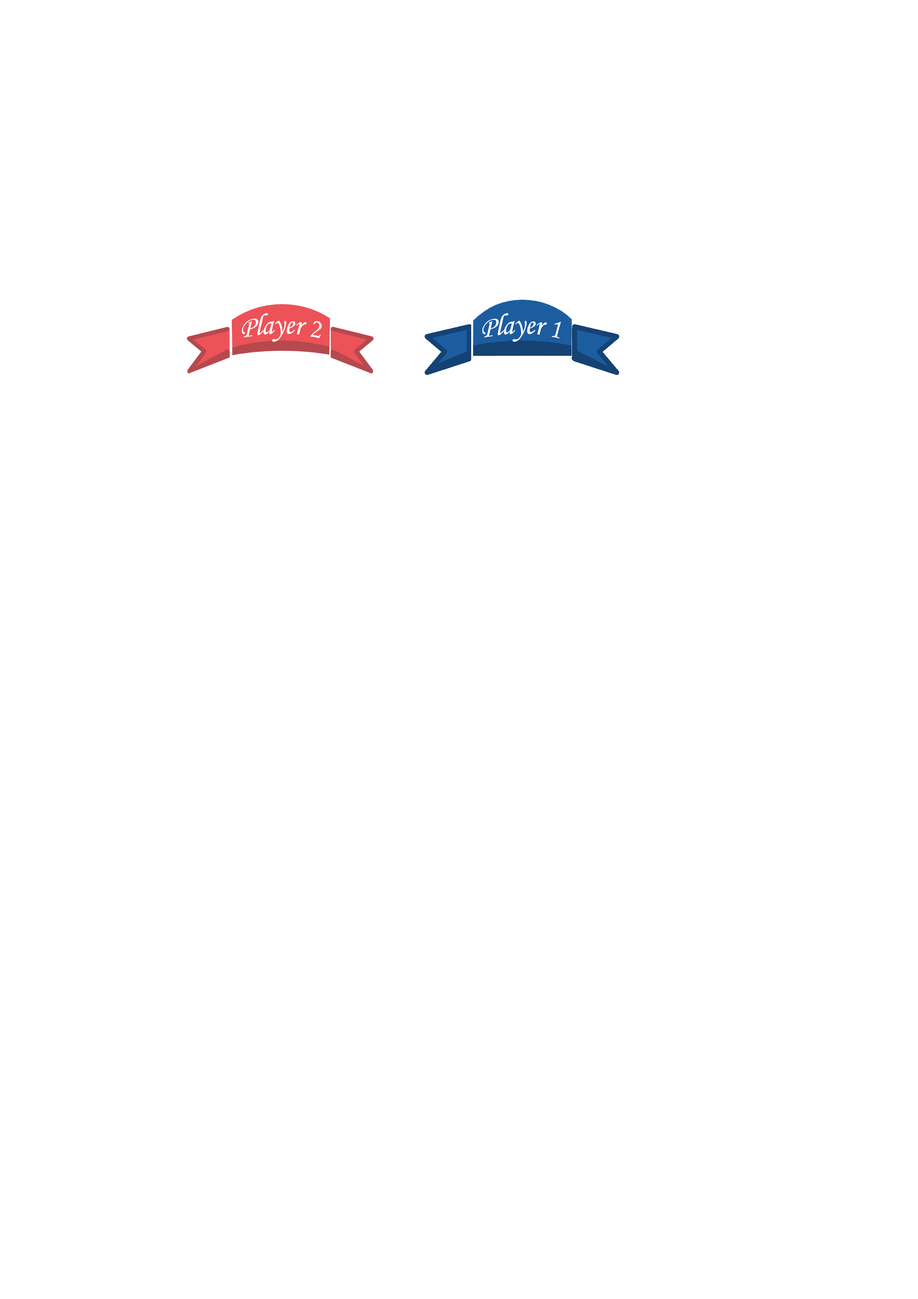
<style>
.page{position:relative;width:918px;height:1299px;background:#ffffff}
.page>*{position:absolute;margin:0}
.t1{font:27.6px "MonotypeCorsiva";color:#ffffff}
</style>
<div class="page">
<p class="t1" style="left:242px;top:313px;width:80px;height:29px">Player 2</p>
<p class="t1" style="left:482px;top:313px;width:79px;height:29px">Player 1</p>
</div>
